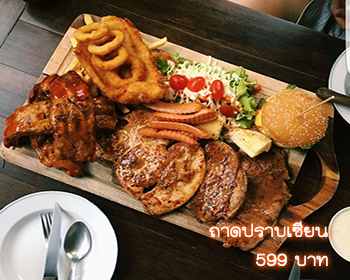
<style>
.page{position:relative;width:350px;height:280px}
.page>*{position:absolute;margin:0}
.t1{font:24px "THKodchasal";color:#ffffff}
</style>
<div class="page">
<p class="t1" style="left:209px;top:221px;width:119px;height:46px;text-align:right">ถาดปราบเซียน<br>บาท 599</p>
</div>
